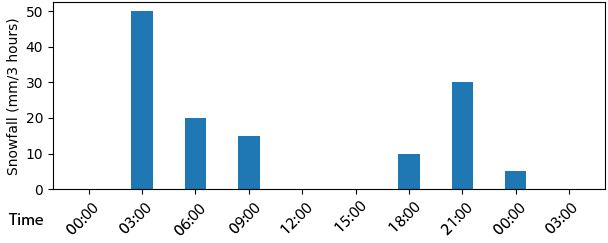
<style>
.page{position:relative;width:608px;height:243px;background:#ffffff}
.page>*{position:absolute;margin:0}
.t1{font:16.7px "MyriadPro-Regular";color:#000000}
</style>
<div class="page">
<p class="t1" style="left:66px;top:203px;width:32px;height:32px;rotate:-45deg">00:00</p>
<p class="t1" style="left:119px;top:203px;width:32px;height:31px;rotate:-45deg">03:00</p>
<p class="t1" style="left:174px;top:204px;width:31px;height:32px;rotate:-45deg">06:00</p>
<p class="t1" style="left:229px;top:203px;width:31px;height:31px;rotate:-45deg">09:00</p>
<p class="t1" style="left:280px;top:203px;width:32px;height:31px;rotate:-45deg">12:00</p>
<p class="t1" style="left:334px;top:201px;width:32px;height:31px;rotate:-45deg">15:00</p>
<p class="t1" style="left:388px;top:202px;width:32px;height:30px;rotate:-45deg">18:00</p>
<p class="t1" style="left:440px;top:203px;width:32px;height:33px;rotate:-45deg">21:00</p>
<p class="t1" style="left:493px;top:203px;width:32px;height:32px;rotate:-45deg">00:00</p>
<p class="t1" style="left:545px;top:203px;width:32px;height:31px;rotate:-45deg">03:00</p>
<p class="t1" style="left:8px;top:213px;width:35px;height:12px">Time</p>
</div>
